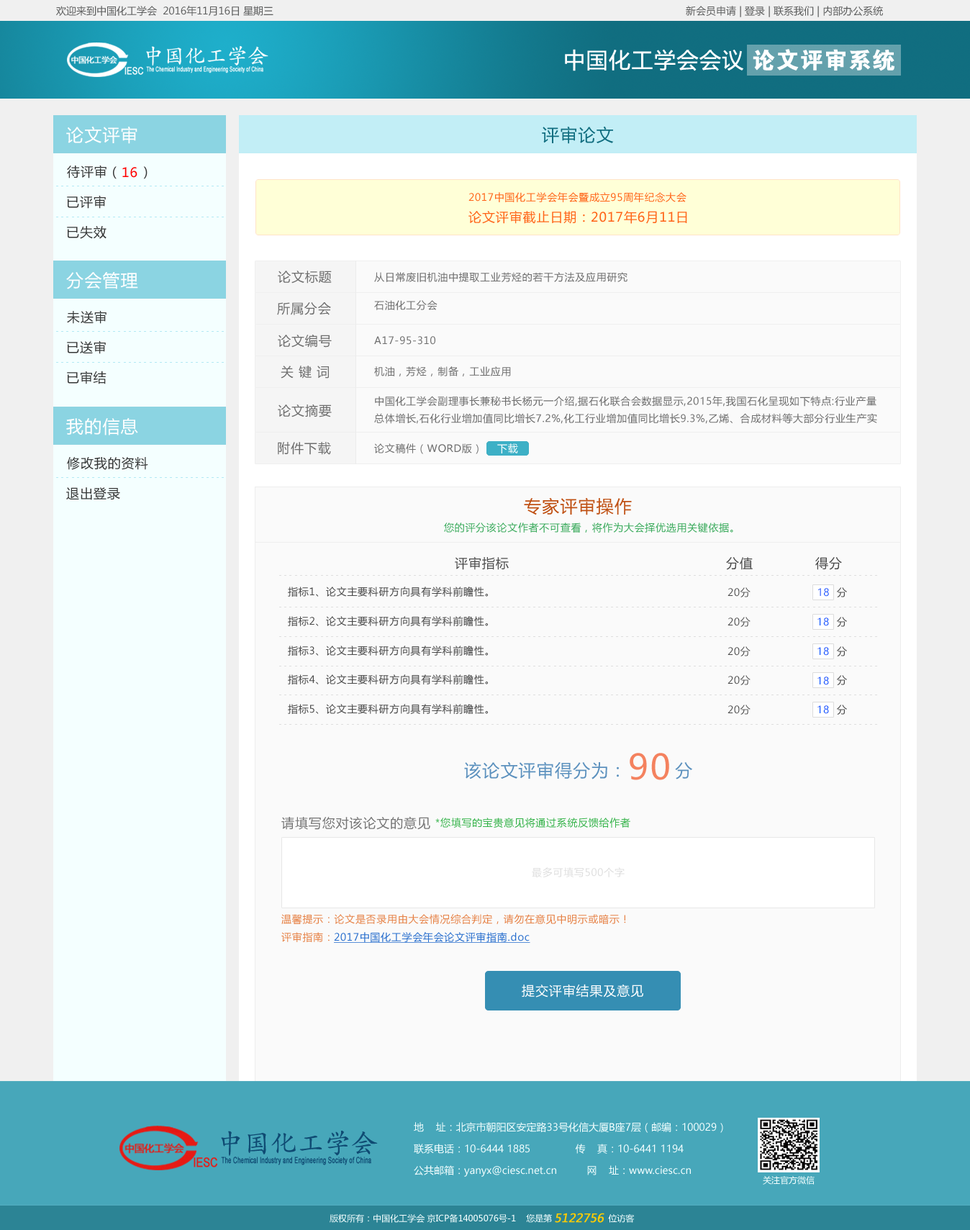
<style>
.page{position:relative;width:970px;height:1230px;background:#fafafa}
.page>*{position:absolute;margin:0}
.t1{font:10.1px "MicrosoftYaHei";color:#5d5e5e}
.t2{font:21.6px "MicrosoftYaHei";letter-spacing:0.05em;color:#ffffff}
.t3{font:22.9px "FZDHTJW--GB1-0";letter-spacing:0.05em;color:#ffffff}
.t4{font:17.3px "MicrosoftYaHei";letter-spacing:0.05em;color:#ffffff}
.t5{font:17.3px "MicrosoftYaHei";letter-spacing:0.05em;color:#116e80}
.t6{font:13px "MicrosoftYaHei";letter-spacing:0.05em;color:#363636}
.t7{font:13px "MicrosoftYaHei";letter-spacing:0.05em;color:#ff0000}
.t8{font:5.8px "SimSun";letter-spacing:0.4em;color:#b2e9f4}
.t9{font:10.1px "MicrosoftYaHei";letter-spacing:0.05em;color:#ff6317}
.t10{font:13px "MicrosoftYaHei";letter-spacing:0.05em;color:#ff6317}
.t11{font:13px "MicrosoftYaHei";letter-spacing:0.05em;color:#6e6e6e}
.t12{font:10.1px "MicrosoftYaHei";letter-spacing:0.05em;color:#6e6e6e}
.t13{font:10.1px/17.3px "MicrosoftYaHei";letter-spacing:0.05em;color:#6e6e6e}
.t14{font:10.1px "MicrosoftYaHei";letter-spacing:0.05em;color:#ffffff}
.t15{font:17.3px "MicrosoftYaHei";letter-spacing:0.05em;color:#c05114}
.t16{font:10.1px "MicrosoftYaHei";letter-spacing:0.05em;color:#39aa5b}
.t17{font:13px "MicrosoftYaHei";letter-spacing:0.05em;color:#4a4a4a}
.t18{font:5.8px "SimSun";letter-spacing:0.4em;color:#dedede}
.t19{font:10.1px "MicrosoftYaHei";letter-spacing:0.05em;color:#4a4a4a}
.t20{font:10.1px "MicrosoftYaHei";letter-spacing:0.05em;color:#004efe}
.t21{font:17.3px "MicrosoftYaHei";letter-spacing:0.05em;color:#5c91be}
.t22{font:34.5px "MicrosoftYaHei";letter-spacing:0.05em;color:#f4825f}
.t23{font:13px "MicrosoftYaHei";letter-spacing:0.05em;color:#757575}
.t24{font:10.1px "MicrosoftYaHei";letter-spacing:0.05em;color:#35b34a}
.t25{font:10.1px "MicrosoftYaHei";letter-spacing:0.05em;color:#dedede}
.t26{font:10.1px "MicrosoftYaHei";letter-spacing:0.05em;color:#e68145}
.t27{font:10.1px "MicrosoftYaHei";letter-spacing:0.05em;color:#266dcd;text-decoration:underline}
.t28{font:13px "MicrosoftYaHei";letter-spacing:0.05em;color:#ffffff}
.t29{font:10.1px/21.6px "MicrosoftYaHei";color:#f4ffff}
.t30{font:8.6px "MicrosoftYaHei";color:#f4ffff}
.t31{font:11.5px "MicrosoftYaHei";color:#ffcc00;font-weight:bold;font-style:italic}
</style>
<div class="page">
<p class="t1" style="left:56px;top:6px;width:217px;height:10px">欢迎来到中国化工学会  2016年11月16日 星期三</p>
<p class="t1" style="left:686px;top:6px;width:197px;height:11px">新会员申请 | 登录 | 联系我们 | 内部办公系统</p>
<p class="t2" style="left:565px;top:49px;width:178px;height:22px">中国化工学会会议</p>
<p class="t3" style="left:753px;top:49px;width:141px;height:22px">论文评审系统</p>
<p class="t4" style="left:66px;top:126px;width:71px;height:18px">论文评审</p>
<p class="t5" style="left:542px;top:126px;width:72px;height:18px">评审论文</p>
<p class="t6" style="left:67px;top:165px;width:80px;height:14px">待评审（    ）</p>
<p class="t7" style="left:122px;top:167px;width:15px;height:11px">16</p>
<p class="t8" style="left:56px;top:186px;width:168px;height:0px">---------------------------------</p>
<p class="t6" style="left:67px;top:195px;width:39px;height:14px">已评审</p>
<p class="t9" style="left:468px;top:192px;width:218px;height:10px">2017中国化工学会年会暨成立95周年纪念大会</p>
<p class="t8" style="left:56px;top:217px;width:168px;height:0px">---------------------------------</p>
<p class="t10" style="left:468px;top:210px;width:219px;height:14px">论文评审截止日期：2017年6月11日</p>
<p class="t6" style="left:67px;top:226px;width:39px;height:13px">已失效</p>
<p class="t4" style="left:66px;top:272px;width:72px;height:17px">分会管理</p>
<p class="t11" style="left:278px;top:271px;width:54px;height:12px">论文标题</p>
<p class="t12" style="left:374px;top:272px;width:253px;height:10px">从日常废旧机油中提取工业芳烃的若干方法及应用研究</p>
<p class="t11" style="left:277px;top:302px;width:54px;height:13px">所属分会</p>
<p class="t12" style="left:374px;top:300px;width:63px;height:10px">石油化工分会</p>
<p class="t6" style="left:67px;top:310px;width:39px;height:14px">未送审</p>
<p class="t8" style="left:56px;top:331px;width:168px;height:1px">---------------------------------</p>
<p class="t6" style="left:67px;top:340px;width:39px;height:14px">已送审</p>
<p class="t11" style="left:278px;top:334px;width:54px;height:13px">论文编号</p>
<p class="t12" style="left:374px;top:336px;width:61px;height:9px">A17-95-310</p>
<p class="t8" style="left:56px;top:362px;width:168px;height:1px">---------------------------------</p>
<p class="t11" style="left:281px;top:365px;width:48px;height:13px">关 键 词</p>
<p class="t6" style="left:67px;top:371px;width:39px;height:13px">已审结</p>
<p class="t12" style="left:374px;top:366px;width:137px;height:10px">机油，芳烃，制备，工业应用</p>
<p class="t13" style="left:374px;top:396px;width:503px;height:28px">中国化工学会副理事长兼秘书长杨元一介绍,据石化联合会数据显示,2015年,我国石化呈现如下特点:行业产量总体增长,石化行业增加值同比增长7.2%,化工行业增加值同比增长9.3%,乙烯、合成材料等大部分行业生产实现了不同程度的增长;全行业效益总体下滑,主营业务收入12.74万亿元</p>
<p class="t11" style="left:278px;top:404px;width:54px;height:13px">论文摘要</p>
<p class="t4" style="left:66px;top:417px;width:72px;height:18px">我的信息</p>
<p class="t11" style="left:278px;top:442px;width:53px;height:13px">附件下载</p>
<p class="t12" style="left:374px;top:443px;width:104px;height:11px">论文稿件（WORD版）</p>
<p class="t14" style="left:497px;top:443px;width:21px;height:10px">下载</p>
<p class="t6" style="left:67px;top:457px;width:81px;height:13px">修改我的资料</p>
<p class="t8" style="left:56px;top:477px;width:168px;height:1px">---------------------------------</p>
<p class="t6" style="left:66px;top:487px;width:54px;height:13px">退出登录</p>
<p class="t15" style="left:524px;top:497px;width:108px;height:18px">专家评审操作</p>
<p class="t16" style="left:444px;top:522px;width:289px;height:10px">您的评分该论文作者不可查看，将作为大会择优选用关键依据。</p>
<p class="t17" style="left:455px;top:556px;width:54px;height:14px">评审指标</p>
<p class="t17" style="left:726px;top:557px;width:27px;height:13px">分值</p>
<p class="t17" style="left:815px;top:557px;width:27px;height:13px">得分</p>
<p class="t18" style="left:279px;top:575px;width:598px;height:1px">--------------------------------------------------------------------------------------------------------------------</p>
<p class="t19" style="left:288px;top:586px;width:200px;height:10px">指标1、论文主要科研方向具有学科前瞻性。</p>
<p class="t19" style="left:727px;top:587px;width:23px;height:10px">20分</p>
<p class="t20" style="left:818px;top:588px;width:11px;height:8px">18</p>
<p class="t19" style="left:837px;top:587px;width:10px;height:10px">分</p>
<p class="t18" style="left:279px;top:606px;width:598px;height:1px">--------------------------------------------------------------------------------------------------------------------</p>
<p class="t19" style="left:288px;top:616px;width:200px;height:10px">指标2、论文主要科研方向具有学科前瞻性。</p>
<p class="t19" style="left:727px;top:617px;width:23px;height:10px">20分</p>
<p class="t20" style="left:817px;top:617px;width:12px;height:9px">18</p>
<p class="t19" style="left:837px;top:617px;width:10px;height:10px">分</p>
<p class="t18" style="left:279px;top:636px;width:598px;height:1px">--------------------------------------------------------------------------------------------------------------------</p>
<p class="t19" style="left:288px;top:645px;width:200px;height:10px">指标3、论文主要科研方向具有学科前瞻性。</p>
<p class="t19" style="left:727px;top:646px;width:23px;height:10px">20分</p>
<p class="t20" style="left:817px;top:647px;width:12px;height:8px">18</p>
<p class="t19" style="left:837px;top:646px;width:10px;height:10px">分</p>
<p class="t18" style="left:279px;top:665px;width:598px;height:1px">--------------------------------------------------------------------------------------------------------------------</p>
<p class="t19" style="left:288px;top:674px;width:200px;height:10px">指标4、论文主要科研方向具有学科前瞻性。</p>
<p class="t19" style="left:727px;top:675px;width:23px;height:10px">20分</p>
<p class="t20" style="left:817px;top:676px;width:12px;height:9px">18</p>
<p class="t19" style="left:837px;top:675px;width:10px;height:10px">分</p>
<p class="t18" style="left:279px;top:694px;width:598px;height:1px">--------------------------------------------------------------------------------------------------------------------</p>
<p class="t19" style="left:288px;top:704px;width:200px;height:10px">指标5、论文主要科研方向具有学科前瞻性。</p>
<p class="t19" style="left:727px;top:704px;width:23px;height:10px">20分</p>
<p class="t20" style="left:817px;top:705px;width:12px;height:9px">18</p>
<p class="t19" style="left:837px;top:704px;width:10px;height:10px">分</p>
<p class="t18" style="left:279px;top:724px;width:598px;height:0px">--------------------------------------------------------------------------------------------------------------------</p>
<p class="t21" style="left:464px;top:761px;width:228px;height:18px">该论文评审得分为：        分</p>
<p class="t22" style="left:630px;top:753px;width:39px;height:27px">90</p>
<p class="t23" style="left:281px;top:816px;width:149px;height:14px">请填写您对该论文的意见</p>
<p class="t24" style="left:435px;top:817px;width:195px;height:10px">*您填写的宝贵意见将通过系统反馈给作者</p>
<p class="t25" style="left:532px;top:867px;width:92px;height:10px">最多可填写500个字</p>
<p class="t26" style="left:281px;top:914px;width:345px;height:10px">温馨提示：论文是否录用由大会情况综合判定，请勿在意见中明示或暗示！</p>
<p class="t26" style="left:281px;top:932px;width:49px;height:10px">评审指南：</p>
<p class="t27" style="left:334px;top:932px;width:196px;height:10px">2017中国化工学会年会论文评审指南.doc</p>
<p class="t28" style="left:522px;top:983px;width:121px;height:14px">提交评审结果及意见</p>
<p class="t29" style="left:414px;top:1122px;width:309px;height:54px">地    址：北京市朝阳区安定路33号化信大厦B座7层（邮编：100029）<br>联系电话：10-6444 1885               传    真：10-6441 1194<br>公共邮箱：yanyx@ciesc.net.cn          网    址：www.ciesc.cn</p>
<p class="t30" style="left:763px;top:1176px;width:51px;height:8px">关注官方微信</p>
<p class="t30" style="left:330px;top:1213px;width:305px;height:9px">版权所有：中国化工学会 京ICP备14005076号-1    您是第                      位访客</p>
<p class="t31" style="left:555px;top:1212px;width:49px;height:10px">5122756</p>
</div>
